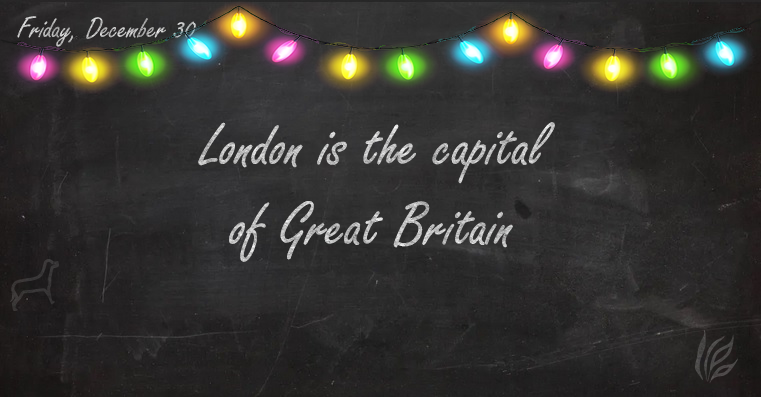
<style>
.page{position:relative;width:761px;height:397px}
.page>*{position:absolute;margin:0}
.t1{font:32px "FreestyleScript-Regular"}
.t2{font:66.7px "FreestyleScript-Regular";color:#c1c1c1}
</style>
<div class="page">
<p class="t1" style="left:17px;top:16px;width:179px;height:31px">Friday, December 30</p>
<p class="t2" style="left:198px;top:122px;width:357px;height:140px;text-align:center">London is the capital<br>of Great Britain</p>
</div>
